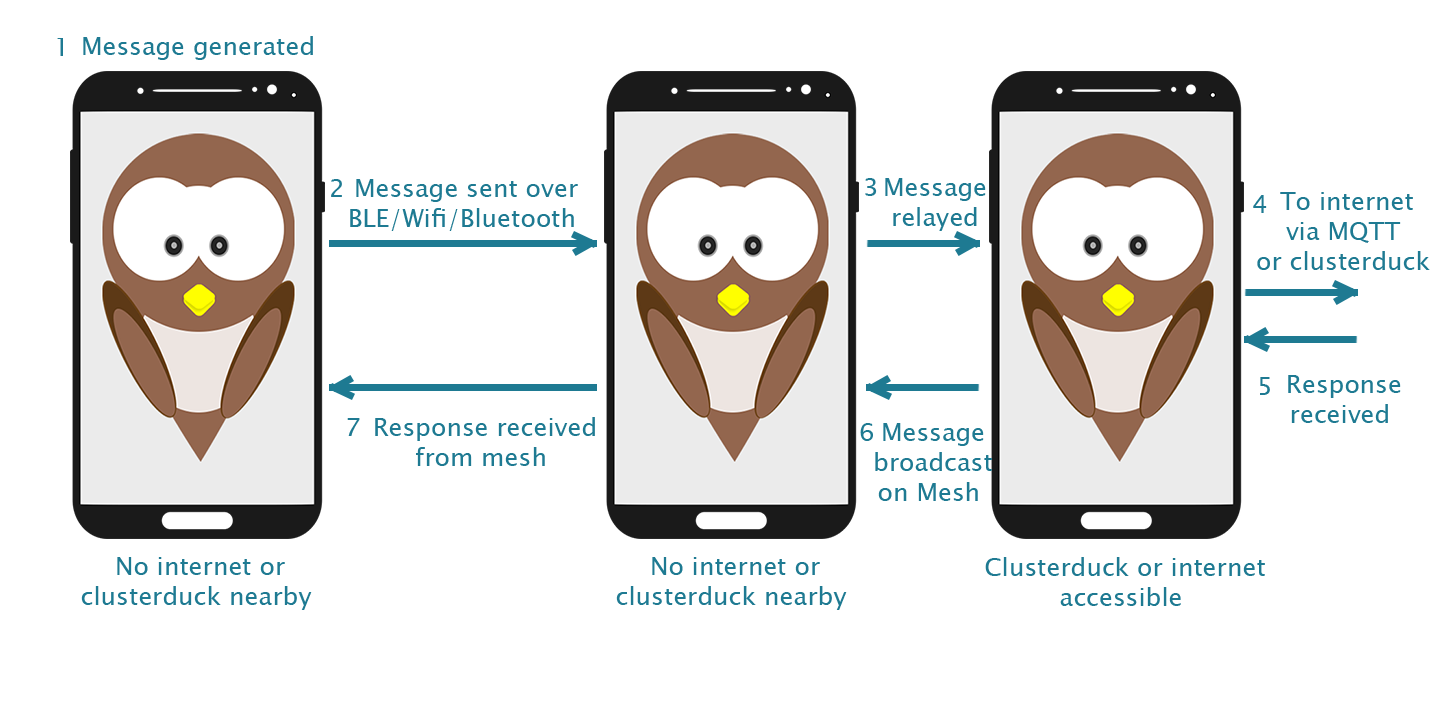
<style>
.page{position:relative;width:1440px;height:709px;background:#ffffff}
.page>*{position:absolute;margin:0}
.t1{font:25px "LucidaSansUnicode";color:#1e7a92}
</style>
<div class="page">
<p class="t1" style="left:57px;top:38px;width:6px;height:18px">1</p>
<p class="t1" style="left:83px;top:36px;width:230px;height:24px">Message generated</p>
<p class="t1" style="left:331px;top:179px;width:11px;height:18px">2</p>
<p class="t1" style="left:350px;top:179px;width:228px;height:52px;text-align:center">Message sent over <br>BLE/Wifi/Bluetooth</p>
<p class="t1" style="left:865px;top:178px;width:12px;height:18px">3</p>
<p class="t1" style="left:885px;top:178px;width:101px;height:53px;text-align:center">Message<br>relayed</p>
<p class="t1" style="left:1253px;top:195px;width:14px;height:18px">4</p>
<p class="t1" style="left:1257px;top:192px;width:173px;height:78px;text-align:center">To internet <br>via MQTT<br>or clusterduck</p>
<p class="t1" style="left:1260px;top:377px;width:10px;height:18px">5</p>
<p class="t1" style="left:1288px;top:375px;width:113px;height:48px;text-align:center">Response <br>received</p>
<p class="t1" style="left:347px;top:418px;width:13px;height:18px">7</p>
<p class="t1" style="left:375px;top:417px;width:220px;height:49px;text-align:center">Response received <br>from mesh</p>
<p class="t1" style="left:860px;top:423px;width:13px;height:18px">6</p>
<p class="t1" style="left:875px;top:423px;width:117px;height:78px;text-align:center">Message <br>broadcast <br>on Mesh</p>
<p class="t1" style="left:81px;top:557px;width:231px;height:53px;text-align:center">No internet or <br>clusterduck nearby</p>
<p class="t1" style="left:616px;top:557px;width:231px;height:53px;text-align:center">No internet or <br>clusterduck nearby</p>
<p class="t1" style="left:985px;top:557px;width:280px;height:49px;text-align:center">Clusterduck or internet <br>accessible</p>
</div>
